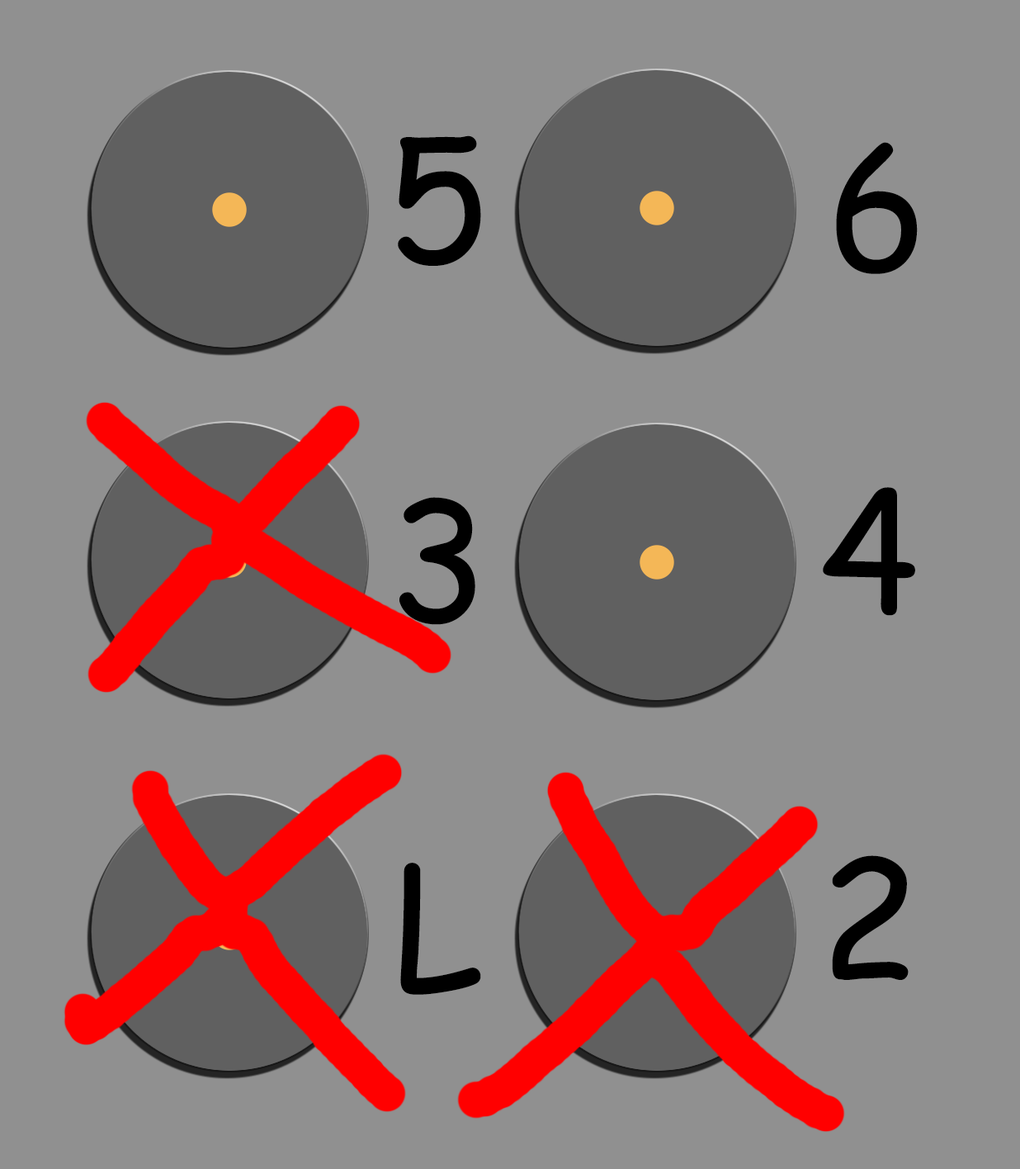
<style>
.page{position:relative;width:1020px;height:1169px;background:#909090}
.page>*{position:absolute;margin:0}
.t1{font:165.1px "ComicSansMS";letter-spacing:0.04em;color:#000000}
</style>
<div class="page">
<p class="t1" style="left:398px;top:135px;width:83px;height:131px">5</p>
<p class="t1" style="left:836px;top:142px;width:82px;height:132px">6</p>
<p class="t1" style="left:400px;top:497px;width:75px;height:128px">3</p>
<p class="t1" style="left:823px;top:487px;width:92px;height:129px">4</p>
<p class="t1" style="left:832px;top:855px;width:77px;height:125px">2</p>
<p class="t1" style="left:400px;top:863px;width:81px;height:132px">L</p>
</div>
